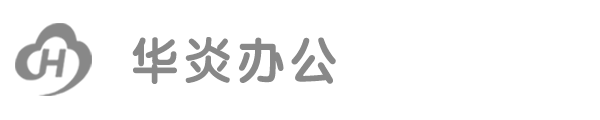
<style>
.page{position:relative;width:600px;height:120px;background:#ffffff}
.page>*{position:absolute;margin:0}
.t1{font:50px "FZY4JW--GB1-0";letter-spacing:0.1em;color:#888888;scale:0.96 1}
</style>
<div class="page">
<p class="t1" style="left:132px;top:37px;width:204px;height:47px">华炎办公</p>
</div>
